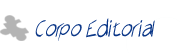
<style>
.page{position:relative;width:180px;height:53px;background:#ffffff}
.page>*{position:absolute;margin:0}
.t1{font:24px "AirCutLight";color:#0b3788}
</style>
<div class="page">
<p class="t1" style="left:35px;top:18px;width:120px;height:23px">Corpo Editorial</p>
</div>
